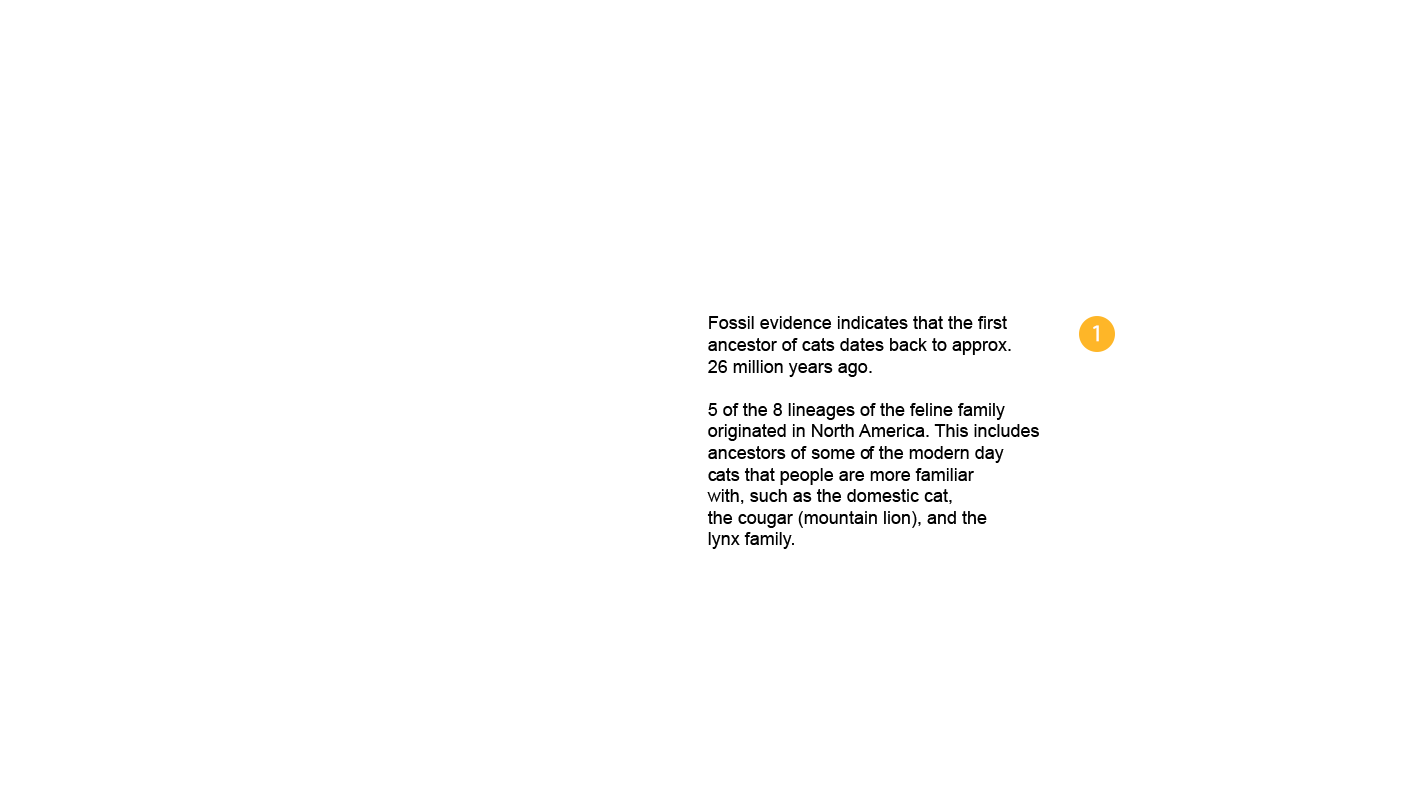
<style>
.page{position:relative;width:1415px;height:809px;background:#ffffff}
.page>*{position:absolute;margin:0}
.t1{font:18px "ArialMT";color:#000000}
</style>
<div class="page">
<p class="t1" style="left:707px;top:316px;width:332px;height:233px">Fossil evidence indicates that the first<br>ancestor of cats dates back to approx.<br>26 million years ago.<br><br>5 of the 8 lineages of the feline family<br>originated in North America. This includes<br>ancestors of some of the modern day<br>cats that people are more familiar<br>with, such as the domestic cat,<br>the cougar (mountain lion), and the<br>lynx family.</p>
</div>
